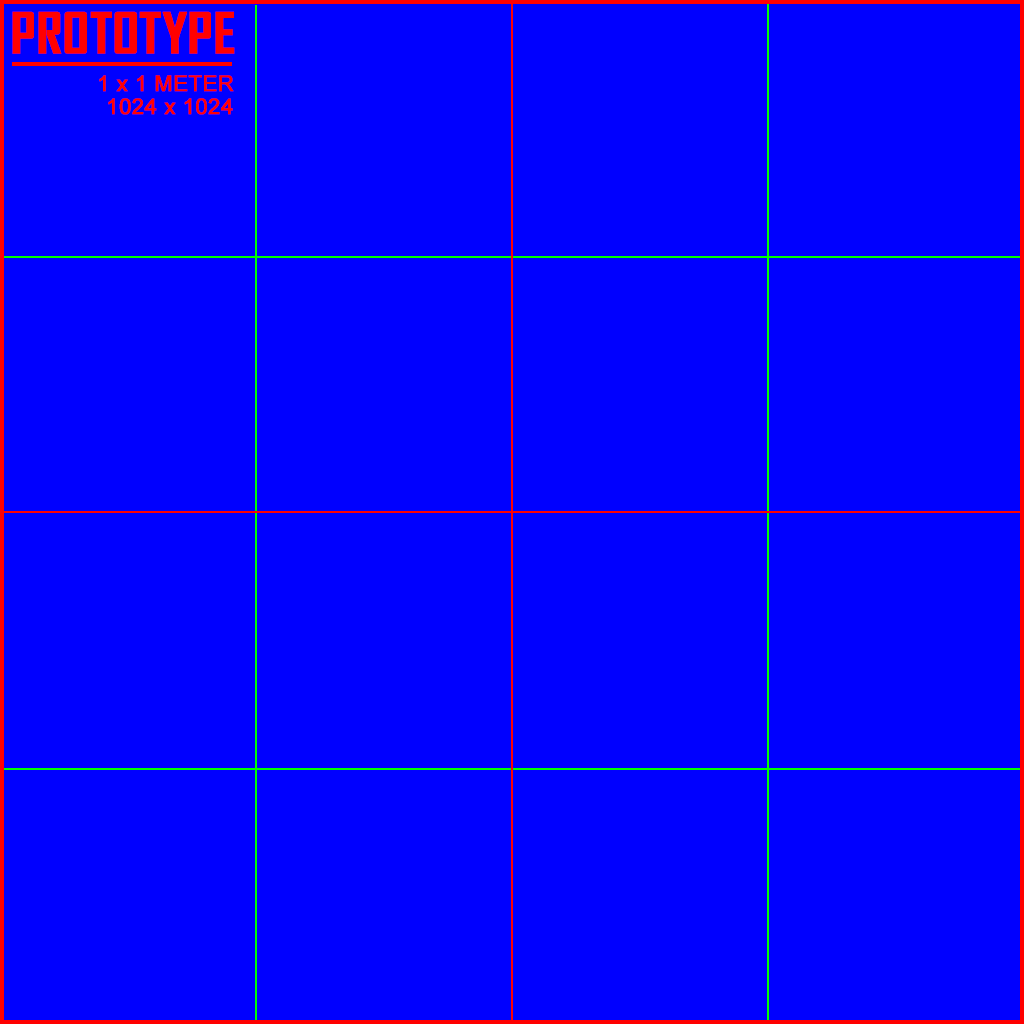
<style>
.page{position:relative;width:1024px;height:1024px;background:#0000ff}
.page>*{position:absolute;margin:0}
.t1{font:54px "AgencyFB-Bold";color:#ff0000;font-weight:bold}
.t2{font:22px "ArialMT";color:#ff0000;font-weight:bold}
</style>
<div class="page">
<p class="t1" style="left:12px;top:11px;width:223px;height:43px">PROTOTYPE</p>
<p class="t2" style="left:99px;top:75px;width:135px;height:17px">1 x 1 METER</p>
<p class="t2" style="left:108px;top:98px;width:125px;height:17px">1024 x 1024</p>
</div>
